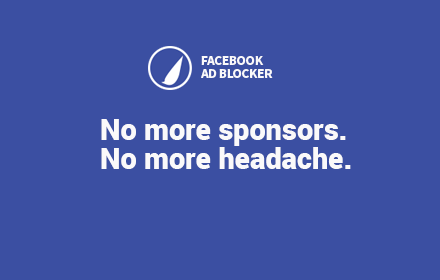
<style>
.page{position:relative;width:440px;height:280px;background:#3b4fa2}
.page>*{position:absolute;margin:0}
.t1{font:13.4px/12.7px "SourceSansPro-Bold";letter-spacing:-0.02em;color:#faf9fa}
.t2{font:29px/29px "Roboto-Black";color:#faf9fa}
</style>
<div class="page">
<p class="t1" style="left:201px;top:56px;width:72px;height:22px">FACEBOOK<br>AD BLOCKER</p>
<p class="t2" style="left:101px;top:119px;width:250px;height:50px">No more sponsors.<br>No more headache.</p>
</div>
